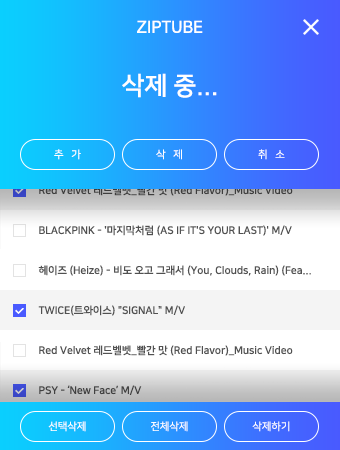
<style>
.page{position:relative;width:340px;height:450px}
.page>*{position:absolute;margin:0}
.t1{font:16.7px "NanumSquareB";color:#ffffff}
.t2{font:25px "NanumSquareB";color:#ffffff}
.t3{font:10.4px "NanumSquareR";color:#ffffff}
.t4{font:10.4px "NanumSquareB";color:#515151}
.t5{font:10.4px "NanumSquareR";color:#fefeff}
</style>
<div class="page">
<p class="t1" style="left:137px;top:20px;width:66px;height:13px">ZIPTUBE</p>
<p class="t2" style="left:122px;top:73px;width:95px;height:25px">삭제 중...</p>
<p class="t3" style="left:54px;top:149px;width:27px;height:11px">추   가</p>
<p class="t3" style="left:156px;top:149px;width:26px;height:11px">삭   제</p>
<p class="t3" style="left:258px;top:149px;width:27px;height:11px">취   소</p>
<p class="t4" style="left:39px;top:185px;width:254px;height:11px">Red Velvet 레드벨벳_빨간 맛 (Red Flavor)_Music Video</p>
<p class="t4" style="left:39px;top:225px;width:253px;height:11px">BLACKPINK - '마지막처럼 (AS IF IT'S YOUR LAST)' M/V</p>
<p class="t4" style="left:38px;top:265px;width:273px;height:11px">헤이즈 (Heize) - 비도 오고 그래서 (You, Clouds, Rain) (Fea...</p>
<p class="t4" style="left:38px;top:305px;width:147px;height:11px">TWICE(트와이스) "SIGNAL" M/V</p>
<p class="t4" style="left:39px;top:345px;width:254px;height:11px">Red Velvet 레드벨벳_빨간 맛 (Red Flavor)_Music Video</p>
<p class="t4" style="left:39px;top:385px;width:103px;height:10px">PSY - ‘New Face’ M/V</p>
<p class="t3" style="left:48px;top:421px;width:38px;height:11px">선택삭제</p>
<p class="t5" style="left:151px;top:421px;width:37px;height:11px">전체삭제</p>
<p class="t5" style="left:252px;top:421px;width:38px;height:11px">삭제하기</p>
</div>
